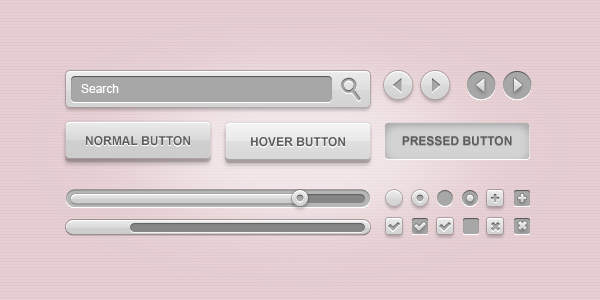
<style>
.page{position:relative;width:600px;height:300px;background:#e6ced2}
.page>*{position:absolute;margin:0}
.t1{font:12px "ArialMT";color:#ffffff}
.t2{font:12px "Arial-BoldMT";color:#5e5d5d;text-transform:uppercase}
</style>
<div class="page">
<p class="t1" style="left:81px;top:84px;width:38px;height:9px">Search</p>
<p class="t2" style="left:86px;top:136px;width:104px;height:10px">normal button</p>
<p class="t2" style="left:251px;top:137px;width:94px;height:10px">hover button</p>
<p class="t2" style="left:402px;top:136px;width:110px;height:10px">pressed button</p>
</div>
